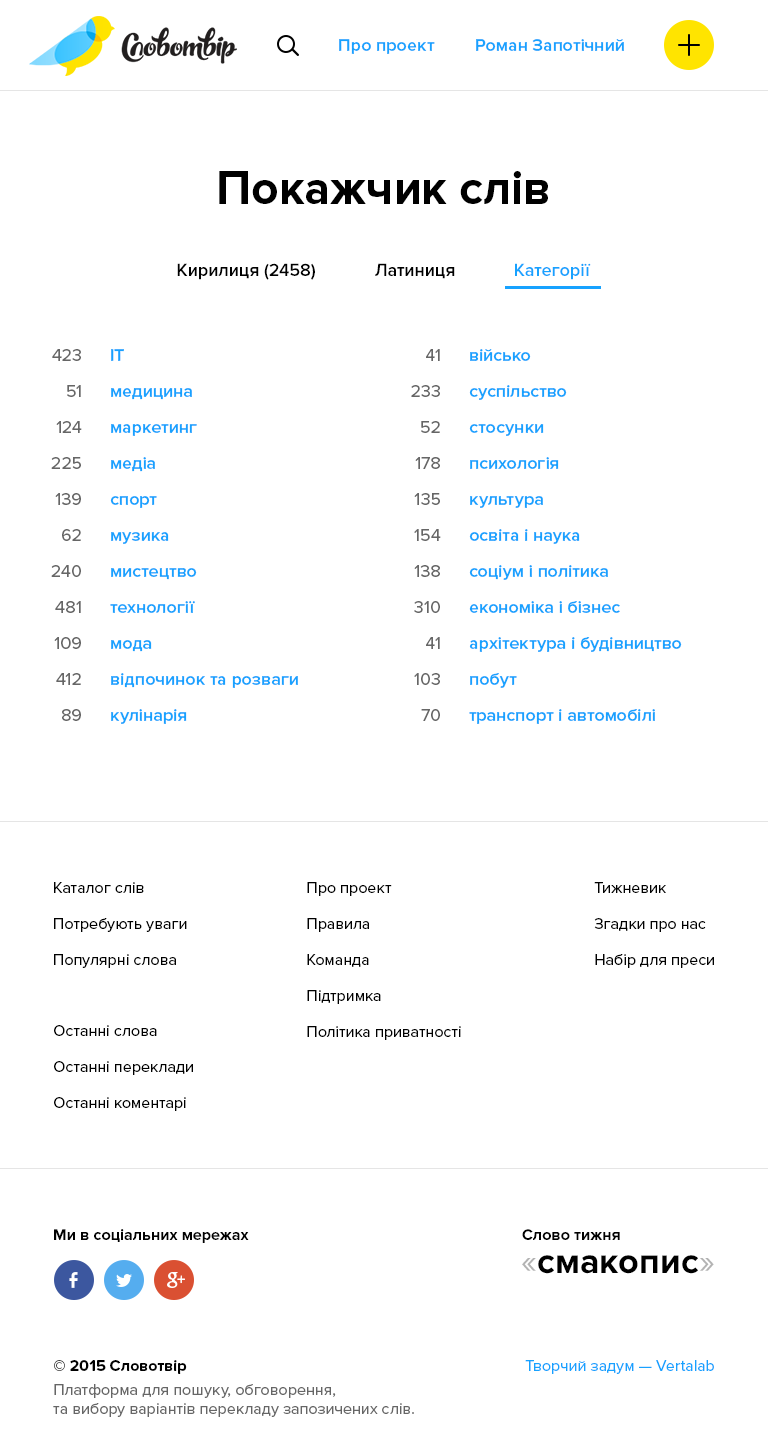
<style>
.page{position:relative;width:768px;height:1454px;background:#ffffff}
.page>*{position:absolute;margin:0}
.t1{font:18px "ProximaNova-Semibold";color:#17a2ff}
.t2{font:48px "ProximaNova-Bold";color:#000000}
.t3{font:18px "ProximaNova-Semibold";color:#000000}
.t4{font:18px/36px "ProximaNova-Regular";color:#666666}
.t5{font:18px/36px "ProximaNova-Semibold";color:#17a2ff}
.t6{font:16px/36px "ProximaNova-Regular";color:#000000}
.t7{font:16px/36px "ProximaNova-Regular";color:#010101}
.t8{font:16px "ProximaNova-Bold";color:#010101}
.t9{font:36px "ProximaNova-Bold";color:#000000}
.t10{font:36px "ProximaNova-Regular";color:#b3b3b3}
.t11{font:16px "ProximaNova-Regular";color:#666666}
.t12{font:16px/22px "ProximaNova-Bold";color:#000000}
.t13{font:16px/24px "ProximaNova-Regular";color:#666666}
.t14{font:16px "ProximaNova-Regular";color:#17a2ff}
</style>
<div class="page">
<p class="t1" style="left:339px;top:39px;width:96px;height:15px">Про проект</p>
<p class="t1" style="left:476px;top:39px;width:148px;height:12px">Роман Запотічний</p>
<p class="t2" style="left:219px;top:171px;width:329px;height:33px">Покажчик слів</p>
<p class="t3" style="left:177px;top:263px;width:138px;height:17px">Кирилиця (2458)</p>
<p class="t3" style="left:375px;top:263px;width:80px;height:16px">Латиниця</p>
<p class="t1" style="left:515px;top:263px;width:76px;height:17px">Категорії</p>
<p class="t4" style="left:51px;top:349px;width:31px;height:372px;text-align:right">423<br>51<br>124<br>225<br>139<br>62<br>240<br>481<br>109<br>412<br>89</p>
<p class="t5" style="left:110px;top:349px;width:188px;height:375px">IT<br>медицина<br>маркетинг<br>медіа<br>спорт<br>музика<br>мистецтво<br>технології<br>мода<br>відпочинок та розваги<br>кулінарія</p>
<p class="t4" style="left:411px;top:349px;width:30px;height:372px;text-align:right">41<br>233<br>52<br>178<br>135<br>154<br>138<br>310<br>41<br>103<br>70</p>
<p class="t5" style="left:469px;top:349px;width:213px;height:375px">військо<br>суспільство<br>стосунки<br>психологія<br>культура<br>освіта і наука<br>соціум і політика<br>економіка і бізнес<br>архітектура і будівництво<br>побут<br>транспорт і автомобілі</p>
<p class="t6" style="left:54px;top:882px;width:133px;height:86px">Каталог слів<br>Потребують уваги<br>Популярні слова</p>
<p class="t6" style="left:307px;top:882px;width:154px;height:158px">Про проект<br>Правила<br>Команда<br>Підтримка<br>Політика приватності</p>
<p class="t7" style="left:594px;top:882px;width:120px;height:86px">Тижневик<br>Згадки про нас<br>Набір для преси</p>
<p class="t6" style="left:54px;top:1025px;width:139px;height:86px">Останні слова<br>Останні переклади<br>Останні коментарі</p>
<p class="t8" style="left:54px;top:1229px;width:195px;height:14px">Ми в соціальних мережах</p>
<p class="t8" style="left:522px;top:1229px;width:98px;height:11px">Слово тижня</p>
<p class="t9" style="left:522px;top:1255px;width:192px;height:19px"><span class="t10">«</span>смакопис<span class="t10">»</span></p>
<p class="t11" style="left:53px;top:1360px;width:361px;height:57px"><span class="t12">© 2015 Словотвір<br></span><span class="t13">Платформа для пошуку, обговорення,<br></span>та вибору варіантів перекладу запозичених слів.</p>
<p class="t14" style="left:525px;top:1360px;width:189px;height:14px">Творчий задум — Vertalab</p>
</div>
